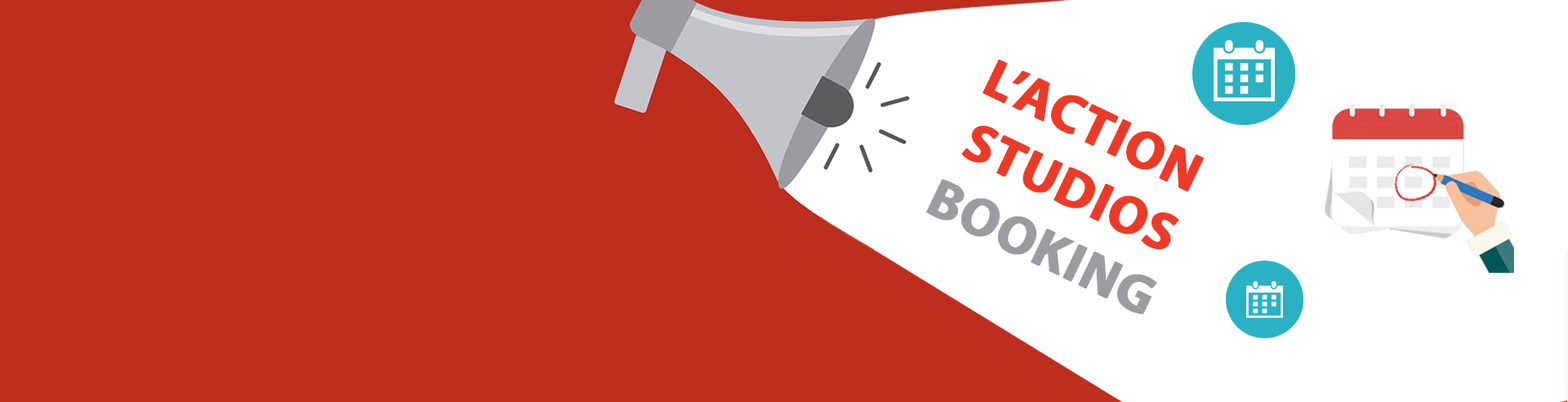
<style>
.page{position:relative;width:1568px;height:402px;background:#bd2e1e}
.page>*{position:absolute;margin:0}
.t1{font:54.9px "MyriadPro-Bold";color:#ed3a26;text-transform:uppercase;font-weight:bold}
.t2{font:54.9px "MyriadPro-Bold";color:#9c9ba1;text-transform:uppercase;font-weight:bold}
</style>
<div class="page">
<p class="t1" style="left:926px;top:60px;width:279px;height:254px;text-align:center;rotate:26deg">L’action <br>Studios<br><span class="t2">Booking</span></p>
</div>
